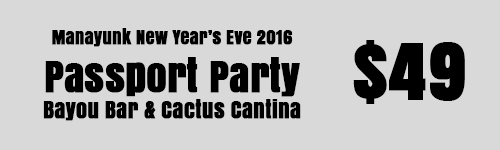
<style>
.page{position:relative;width:500px;height:150px;background:#d9d9d9}
.page>*{position:absolute;margin:0}
.t1{font:18px "Anton";color:#000000;font-weight:bold}
.t2{font:40px "Anton";color:#000000;font-weight:bold}
.t3{font:22px "Anton";color:#000000;font-weight:bold}
.t4{font:72px "Anton";color:#000000;font-weight:bold}
</style>
<div class="page">
<p class="t1" style="left:43px;top:28px;width:258px;height:93px;text-align:center">Manayunk New Year’s Eve 2016<br><span class="t2">Passport Party<br></span><span class="t3">Bayou Bar &amp; Cactus Cantina</span></p>
<p class="t4" style="left:353px;top:40px;width:112px;height:64px">$49</p>
</div>
